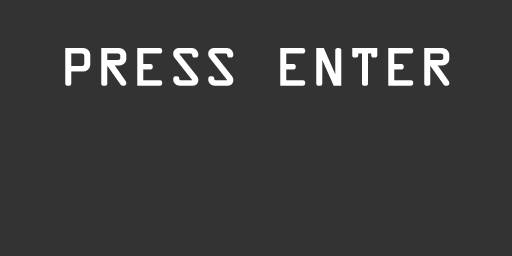
<style>
.page{position:relative;width:512px;height:256px;background:#333333}
.page>*{position:absolute;margin:0}
.t1{font:48px "OCRAStd";color:#ffffff;font-weight:bold}
</style>
<div class="page">
<p class="t1" style="left:65px;top:48px;width:385px;height:38px">PRESS ENTER</p>
</div>
